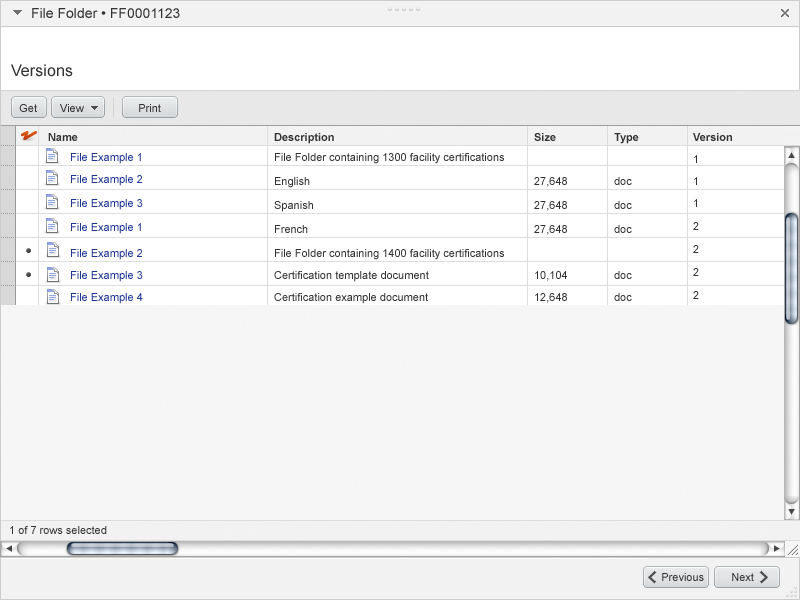
<style>
.page{position:relative;width:800px;height:600px;background:#ffffff}
.page>*{position:absolute;margin:0}
.t1{font:14px "ArialMT";color:#333333}
.t2{font:16px "ArialMT";letter-spacing:0.005em;color:#333333}
.t3{font:11px "ArialMT";color:#333333}
.t4{font:11px "Arial-BoldMT";color:#333333}
.t5{font:11px/24px "ArialMT";color:#333333}
.t6{font:11px/20px "Arial-BoldMT";color:#333333}
.t7{font:11px/20px "ArialMT";color:#333333}
.t8{font:11px/22px "ArialMT";color:#333333}
.t9{font:11px/23px "ArialMT";color:#333333}
.t10{font:11px/22px "ArialMT";color:#1f3695}
.t11{font:11px/20px "ArialMT";color:#1f3695}
.t12{font:11px/24px "ArialMT";color:#1f3695}
</style>
<div class="page">
<p class="t1" style="left:32px;top:8px;width:148px;height:10px">File Folder • FF0001123</p>
<p class="t2" style="left:11px;top:64px;width:62px;height:13px">Versions</p>
<p class="t3" style="left:19px;top:104px;width:18px;height:8px">Get</p>
<p class="t3" style="left:60px;top:104px;width:24px;height:8px">View</p>
<p class="t3" style="left:139px;top:104px;width:22px;height:8px">Print</p>
<p class="t4" style="left:48px;top:133px;width:30px;height:8px">Name</p>
<p class="t5" style="left:274px;top:133px;width:230px;height:171px"><span class="t6">Description<br></span><span class="t7">File Folder containing 1300 facility certifications<br></span>English <br>Spanish<br>French<br>File Folder containing 1400 facility certifications<br><span class="t8">Certification template document<br>Certification example document</span></p>
<p class="t5" style="left:534px;top:133px;width:33px;height:170px"><span class="t6">Size<br><br></span>27,648 <br>27,648<br>27,648<br><br><span class="t8">10,104<br>12,648</span></p>
<p class="t5" style="left:614px;top:133px;width:25px;height:168px"><span class="t6">Type<br><br></span>doc <br>doc<br>doc<br><br><span class="t8">doc<br>doc</span></p>
<p class="t6" style="left:693px;top:133px;width:39px;height:166px">Version<br><span class="t8">1<br>1<br>1<br></span><span class="t9">2<br>2<br>2<br>2</span></p>
<p class="t10" style="left:71px;top:153px;width:72px;height:151px"><span class="t6"><br></span><span class="t11">File Example 1<br><br><br><br></span><span class="t12">File Example 2<br></span>File Example 3<br>File Example 4</p>
<p class="t12" style="left:71px;top:175px;width:72px;height:59px"><span class="t11">File Example 2<br></span>File Example 3<br>File Example 1</p>
<p class="t3" style="left:10px;top:526px;width:97px;height:8px">1 of 7 rows selected</p>
<p class="t3" style="left:662px;top:573px;width:42px;height:8px">Previous</p>
<p class="t3" style="left:732px;top:573px;width:22px;height:8px">Next</p>
</div>
